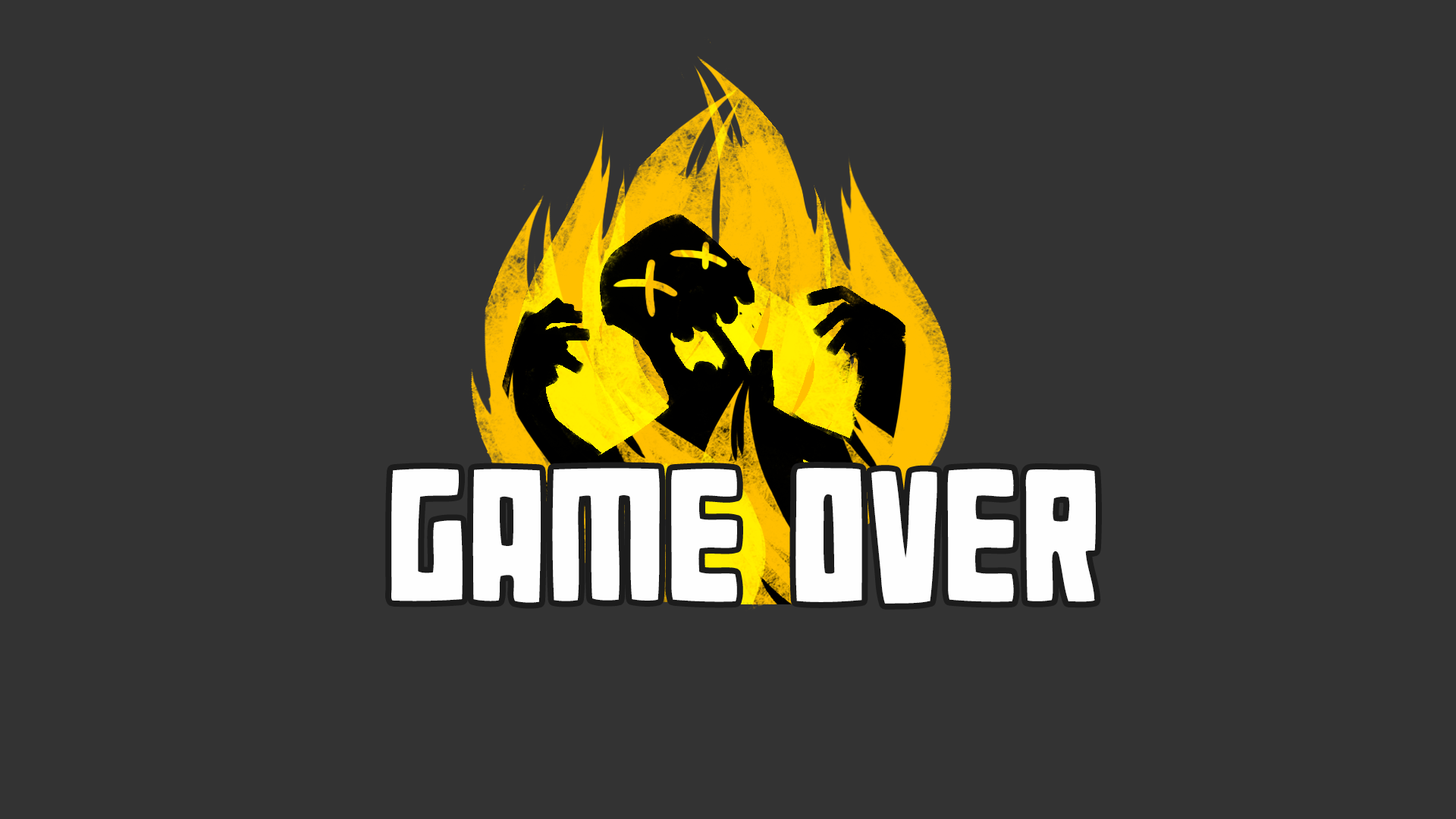
<style>
.page{position:relative;width:1456px;height:819px;background:#333333}
.page>*{position:absolute;margin:0}
.t1{font:217.9px "RugsnatcherDEMO";color:#fefefe}
</style>
<div class="page">
<p class="t1" style="left:391px;top:468px;width:705px;height:136px">GAME OVER</p>
</div>
